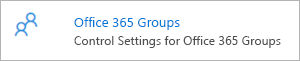
<style>
.page{position:relative;width:300px;height:61px;background:#ffffff}
.page>*{position:absolute;margin:0}
.t1{font:13.3px "SegoeUI";color:#0078d7}
.t2{font:12.3px "SegoeUI";color:#505050}
</style>
<div class="page">
<p class="t1" style="left:74px;top:17px;width:106px;height:13px">Office 365 Groups</p>
<p class="t2" style="left:74px;top:36px;width:207px;height:12px">Control Settings for Office 365 Groups</p>
</div>
